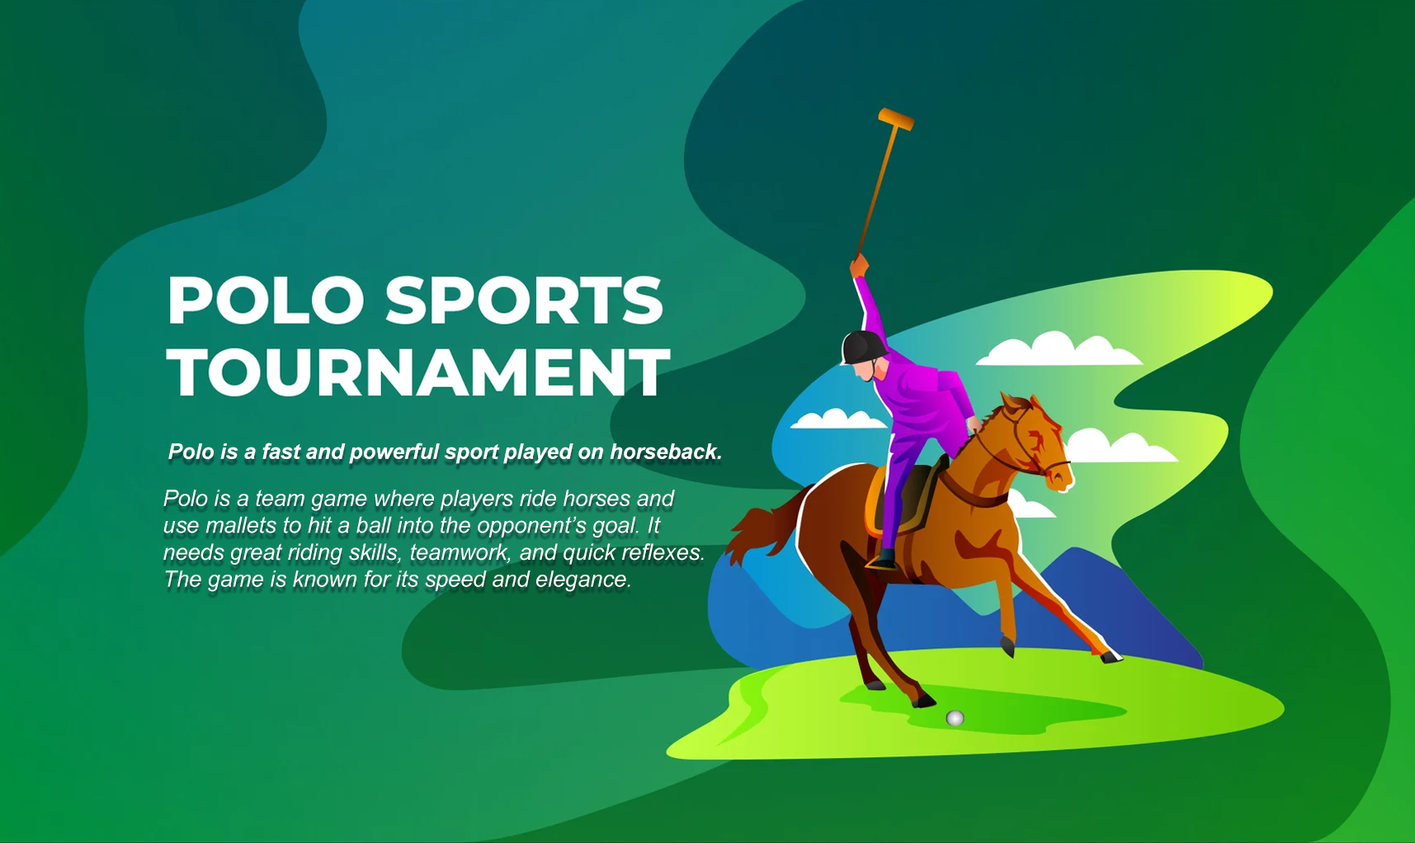
<style>
.page{position:relative;width:1415px;height:843px}
.page>*{position:absolute;margin:0}
.t1{font:21.4px "Arial-BoldItalicMT";color:#fffefa}
.t2{font:22.4px "Arial-ItalicMT";color:#fffefa}
</style>
<div class="page">
<p class="t1" style="left:168px;top:442px;width:553px;height:22px">Polo is a fast and powerful sport played on horseback.</p>
<p class="t2" style="left:163px;top:489px;width:541px;height:103px">Polo is a team game where players ride horses and<br>use mallets to hit a ball into the opponent’s goal. It<br>needs great riding skills, teamwork, and quick reflexes.<br>The game is known for its speed and elegance.</p>
</div>
